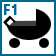
<style>
.page{position:relative;width:56px;height:56px;background:#ffffff}
.page>*{position:absolute;margin:0}
.t1{font:12px "HeadlineR-HM";color:#00698f}
</style>
<div class="page">
<p class="t1" style="left:4px;top:4px;width:13px;height:11px">F1</p>
</div>
